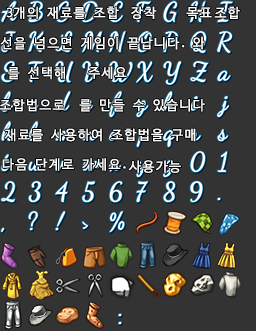
<style>
.page{position:relative;width:256px;height:331px;background:#333333}
.page>*{position:absolute;margin:0}
.t1{font:13.3px "D2Coding";color:#ffffff}
</style>
<div class="page">
<p class="t1" style="left:6px;top:6px;width:113px;height:13px">3개의 재료를 조합</p>
<p class="t1" style="left:131px;top:6px;width:26px;height:14px">장착</p>
<p class="t1" style="left:214px;top:6px;width:26px;height:13px">조합</p>
<p class="t1" style="left:186px;top:7px;width:26px;height:12px">목표</p>
<p class="t1" style="left:0px;top:37px;width:185px;height:13px">선을 넘으면 게임이 끝납니다.</p>
<p class="t1" style="left:192px;top:36px;width:13px;height:14px">와</p>
<p class="t1" style="left:7px;top:66px;width:58px;height:14px">를 선택해</p>
<p class="t1" style="left:88px;top:66px;width:39px;height:13px">주세요</p>
<p class="t1" style="left:0px;top:99px;width:205px;height:13px">조합법으로  를 만들 수 있습니다</p>
<p class="t1" style="left:4px;top:128px;width:192px;height:14px">재료를 사용하여 조합법을 구매</p>
<p class="t1" style="left:2px;top:158px;width:124px;height:13px">다음 단계로 가세요.</p>
<p class="t1" style="left:128px;top:160px;width:53px;height:13px">사용가능</p>
</div>
